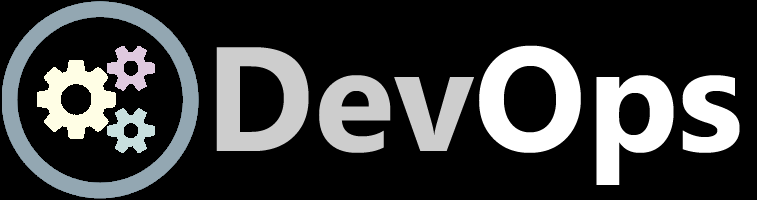
<style>
.page{position:relative;width:757px;height:200px;background:#000000}
.page>*{position:absolute;margin:0}
.t1{font:148px "Ebrima-Bold";color:#cdcdcd}
.t2{font:148px "Ebrima-Bold";color:#ffffff}
</style>
<div class="page">
<p class="t1" style="left:216px;top:45px;width:524px;height:140px">Dev<span class="t2">Ops</span></p>
</div>
